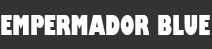
<style>
.page{position:relative;width:212px;height:49px;background:#333333}
.page>*{position:absolute;margin:0}
.t1{font:27.4px "GillSans-UltraBoldCondensed";color:#ffffff;scale:0.9 1}
</style>
<div class="page">
<p class="t1" style="left:1px;top:15px;width:209px;height:20px">EMPERMADOR BLUE</p>
</div>
